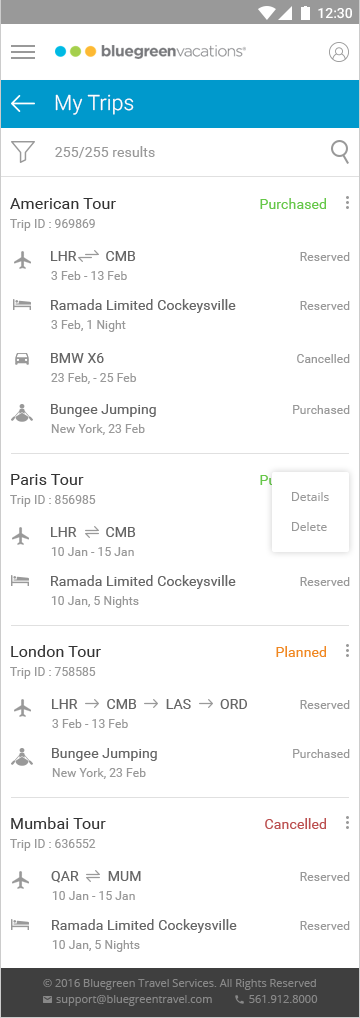
<style>
.page{position:relative;width:360px;height:1018px;background:#ffffff}
.page>*{position:absolute;margin:0}
.t1{font:21px "Roboto-Light";letter-spacing:0.01em;color:#ffffff}
.t2{font:14px "Roboto-Regular";letter-spacing:0.01em;color:#999999}
.t3{font:16px "Roboto-Regular";letter-spacing:0.01em;color:#333333}
.t4{font:14px "Roboto-Regular";letter-spacing:0.01em;color:#66c749}
.t5{font:12px "Roboto-Regular";letter-spacing:0.01em;color:#999999}
.t6{font:14px "Roboto-Regular";letter-spacing:0.01em;color:#666666}
.t7{font:14px "Roboto-Regular";letter-spacing:0.01em;color:#ffffff}
.t8{font:12px/30px "OpenSans";color:#999999}
.t9{font:14px "Roboto-Regular";letter-spacing:0.01em;color:#f08721}
.t10{font:14px "Roboto-Regular";letter-spacing:0.01em;color:#bb5050}
</style>
<div class="page">
<p class="t1" style="left:55px;top:94px;width:79px;height:21px">My Trips</p>
<p class="t2" style="left:55px;top:146px;width:100px;height:12px">255/255 results</p>
<p class="t3" style="left:10px;top:198px;width:106px;height:11px">American Tour</p>
<p class="t4" style="left:260px;top:198px;width:66px;height:11px">Purchased</p>
<p class="t5" style="left:10px;top:219px;width:85px;height:12px">Trip ID : 969869</p>
<p class="t6" style="left:51px;top:251px;width:85px;height:10px">LHR        CMB</p>
<p class="t5" style="left:300px;top:252px;width:50px;height:9px">Reserved</p>
<p class="t5" style="left:51px;top:271px;width:76px;height:9px">3 Feb - 13 Feb</p>
<p class="t6" style="left:51px;top:299px;width:185px;height:14px">Ramada Limited Cockeysville</p>
<p class="t5" style="left:300px;top:301px;width:50px;height:9px">Reserved</p>
<p class="t5" style="left:51px;top:320px;width:75px;height:12px">3 Feb, 1 Night</p>
<p class="t6" style="left:51px;top:353px;width:53px;height:10px">BMW X6</p>
<p class="t5" style="left:297px;top:354px;width:53px;height:9px">Cancelled</p>
<p class="t5" style="left:51px;top:373px;width:86px;height:11px">23 Feb, - 25 Feb</p>
<p class="t6" style="left:51px;top:404px;width:105px;height:13px">Bungee Jumping</p>
<p class="t5" style="left:293px;top:405px;width:57px;height:9px">Purchased</p>
<p class="t5" style="left:51px;top:424px;width:94px;height:11px">New York, 23 Feb</p>
<p class="t3" style="left:11px;top:474px;width:73px;height:11px">Paris Tour</p>
<p class="t7" style="left:260px;top:474px;width:66px;height:11px">Purchased</p>
<p class="t5" style="left:10px;top:495px;width:86px;height:12px">Trip ID : 856985</p>
<p class="t8" style="left:292px;top:492px;width:37px;height:39px">Details<br>Delete</p>
<p class="t6" style="left:51px;top:527px;width:85px;height:10px">LHR        CMB</p>
<p class="t5" style="left:51px;top:547px;width:83px;height:9px">10 Jan - 15 Jan</p>
<p class="t6" style="left:51px;top:575px;width:185px;height:14px">Ramada Limited Cockeysville</p>
<p class="t5" style="left:300px;top:577px;width:50px;height:9px">Reserved</p>
<p class="t5" style="left:51px;top:596px;width:88px;height:12px">10 Jan, 5 Nights</p>
<p class="t3" style="left:11px;top:645px;width:90px;height:12px">London Tour</p>
<p class="t9" style="left:276px;top:646px;width:50px;height:11px">Planned</p>
<p class="t5" style="left:10px;top:667px;width:86px;height:12px">Trip ID : 758585</p>
<p class="t6" style="left:52px;top:699px;width:195px;height:10px">LHR        CMB        LAS        ORD</p>
<p class="t5" style="left:300px;top:700px;width:50px;height:9px">Reserved</p>
<p class="t5" style="left:52px;top:719px;width:76px;height:9px">3 Feb - 13 Feb</p>
<p class="t6" style="left:52px;top:748px;width:105px;height:13px">Bungee Jumping</p>
<p class="t5" style="left:293px;top:749px;width:57px;height:9px">Purchased</p>
<p class="t5" style="left:52px;top:768px;width:94px;height:11px">New York, 23 Feb</p>
<p class="t3" style="left:11px;top:817px;width:95px;height:12px">Mumbai Tour</p>
<p class="t10" style="left:265px;top:818px;width:61px;height:11px">Cancelled</p>
<p class="t5" style="left:10px;top:839px;width:86px;height:12px">Trip ID : 636552</p>
<p class="t6" style="left:51px;top:871px;width:90px;height:12px">QAR        MUM</p>
<p class="t5" style="left:300px;top:872px;width:50px;height:9px">Reserved</p>
<p class="t5" style="left:52px;top:891px;width:83px;height:9px">10 Jan - 15 Jan</p>
<p class="t6" style="left:52px;top:919px;width:185px;height:14px">Ramada Limited Cockeysville</p>
<p class="t5" style="left:300px;top:921px;width:50px;height:9px">Reserved</p>
<p class="t5" style="left:52px;top:940px;width:88px;height:12px">10 Jan, 5 Nights</p>
</div>
